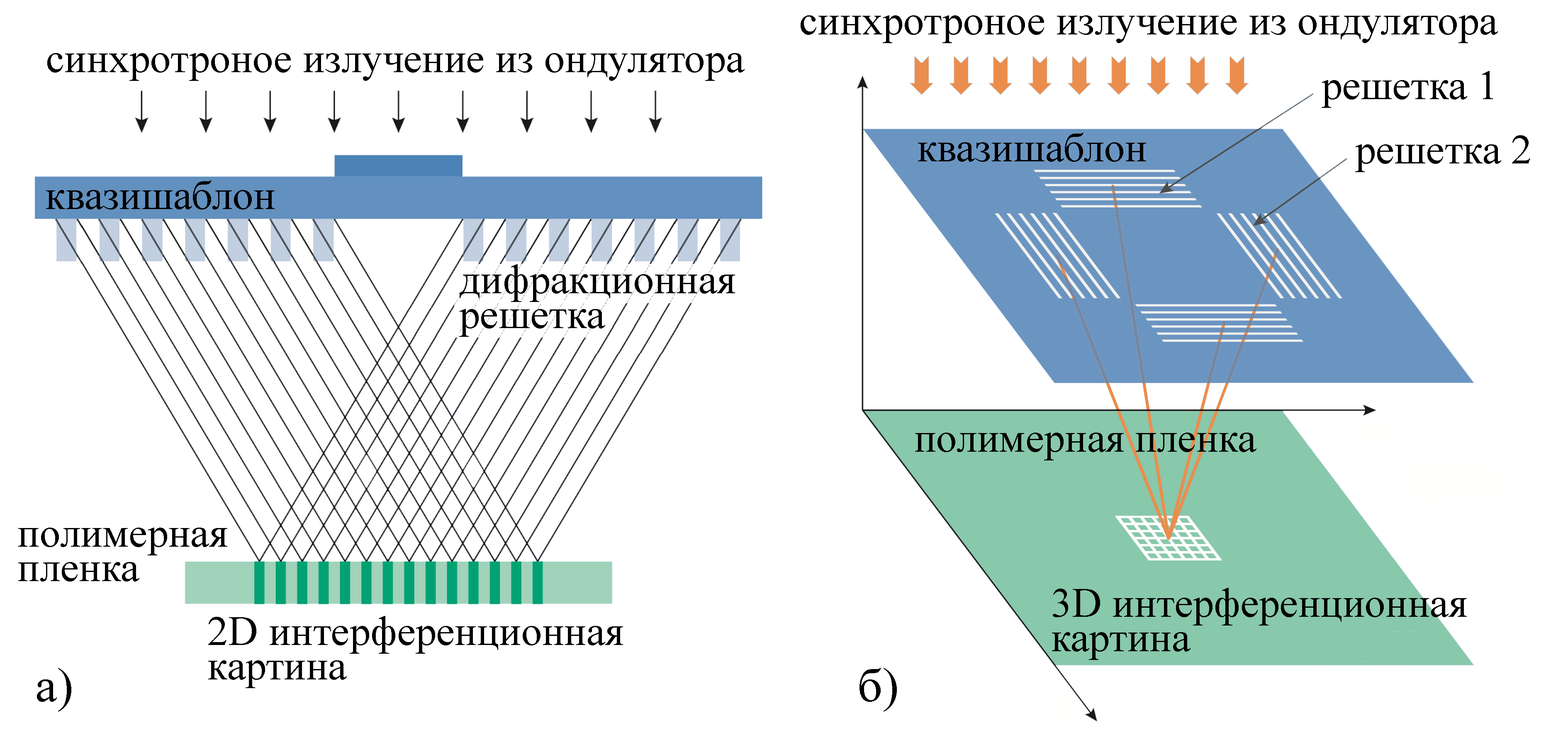
<style>
.page{position:relative;width:1568px;height:735px;background:#ffffff}
.page>*{position:absolute;margin:0}
.t1{font:41.5px "TimesNewRomanPSMT";color:#000000}
.t2{font:41.5px/34.6px "TimesNewRomanPSMT";color:#000000}
.t3{font:48.4px "TimesNewRomanPSMT";color:#000000}
</style>
<div class="page">
<p class="t1" style="left:801px;top:15px;width:697px;height:28px">синхротроное излучение из ондулятора</p>
<p class="t1" style="left:47px;top:53px;width:698px;height:28px">синхротроное излучение из ондулятора</p>
<p class="t1" style="left:1322px;top:71px;width:171px;height:37px">решетка 1</p>
<p class="t1" style="left:918px;top:133px;width:228px;height:29px">квазишаблон</p>
<p class="t1" style="left:1355px;top:135px;width:175px;height:37px">решетка 2</p>
<p class="t1" style="left:46px;top:180px;width:229px;height:29px">квазишаблон</p>
<p class="t2" style="left:459px;top:264px;width:276px;height:73px">дифракционная<br>решетка</p>
<p class="t1" style="left:915px;top:433px;width:341px;height:27px">полимерная пленка</p>
<p class="t2" style="left:18px;top:528px;width:209px;height:54px">полимерная<br>пленка</p>
<p class="t2" style="left:1052px;top:588px;width:415px;height:72px">3D интерференционная<br>картина</p>
<p class="t2" style="left:208px;top:616px;width:415px;height:72px">2D интерференционная<br>картина</p>
<p class="t3" style="left:37px;top:668px;width:34px;height:44px">a)</p>
<p class="t3" style="left:859px;top:668px;width:38px;height:44px">б)</p>
</div>
